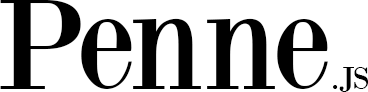
<style>
.page{position:relative;width:368px;height:92px;background:#ffffff}
.page>*{position:absolute;margin:0}
.t1{font:133.3px "BodoniXT";color:#000000}
.t2{font:33.3px "BodoniXT";color:#000000}
</style>
<div class="page">
<p class="t1" style="left:0px;top:0px;width:368px;height:92px">Penne<span class="t2">.JS</span></p>
</div>
